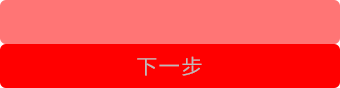
<style>
.page{position:relative;width:340px;height:88px;background:#ff7575}
.page>*{position:absolute;margin:0}
.t1{font:20px "FZLTXHK--GBK1-0";letter-spacing:0.1em;color:#bbbbbb;font-weight:bold}
</style>
<div class="page">
<p class="t1" style="left:137px;top:56px;width:65px;height:20px">下一步</p>
</div>
